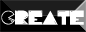
<style>
.page{position:relative;width:86px;height:32px;background:#000000}
.page>*{position:absolute;margin:0}
.t1{font:14px "PacFont";color:#ffffff}
</style>
<div class="page">
<p class="t1" style="left:1px;top:10px;width:83px;height:15px">Create</p>
</div>
